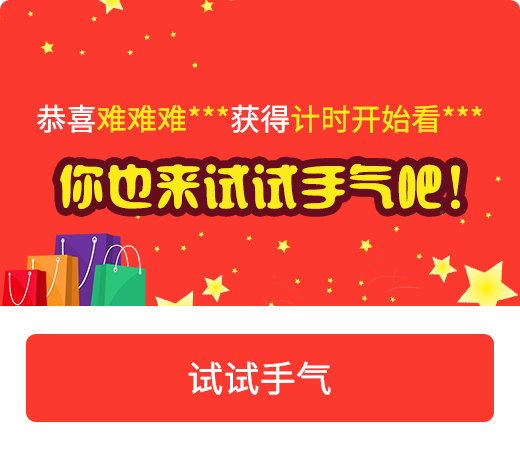
<style>
.page{position:relative;width:520px;height:450px;background:#fc392f}
.page>*{position:absolute;margin:0}
.t1{font:30px "SourceHanSansCN-Regular";letter-spacing:-0.02em;color:#ffeb1a;font-weight:bold}
.t2{font:30px "SourceHanSansCN-Regular";letter-spacing:-0.02em;color:#fdfdfd;font-weight:bold}
.t3{font:48px "SXSLST";letter-spacing:-0.02em;color:#ffeb1a;font-weight:bold}
.t4{font:36px "SourceHanSansCN-Regular";letter-spacing:-0.02em;color:#ffffff;font-weight:bold}
</style>
<div class="page">
<p class="t1" style="left:37px;top:104px;width:446px;height:29px"><span class="t2">恭喜</span>难难难***<span class="t2">获得</span>计时开始看***</p>
<p class="t3" style="left:60px;top:164px;width:400px;height:45px">你也来试试手气吧！</p>
<p class="t4" style="left:188px;top:361px;width:143px;height:34px">试试手气</p>
</div>
